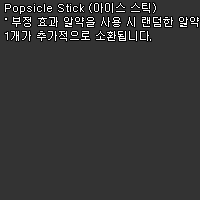
<style>
.page{position:relative;width:200px;height:200px;background:#333333}
.page>*{position:absolute;margin:0}
.t1{font:11px/14px "Dotum";color:#ffffff}
</style>
<div class="page">
<p class="t1" style="left:5px;top:3px;width:194px;height:38px">Popsicle Stick (아이스 스틱)<br>˚ 부정 효과 알약을 사용 시 랜덤한 알약<br>1개가 추가적으로 소환됩니다.</p>
</div>
